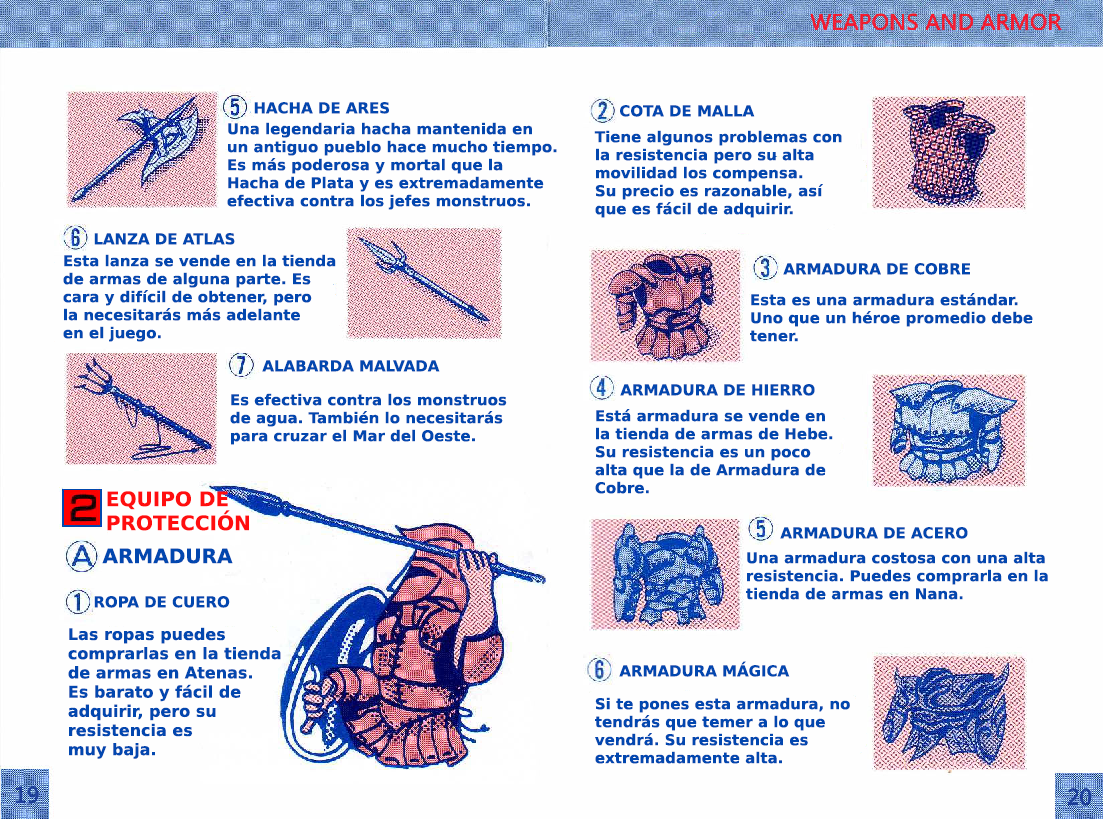
<style>
.page{position:relative;width:1103px;height:819px;background:#fefefe}
.page>*{position:absolute;margin:0}
.t1{font:15px "PrimaSansBT-Bold";color:#0247af}
.t2{font:20px "PrimaSansBT-Bold";color:#ff0e0f}
.t3{font:20px "PrimaSansBT-Bold";color:#0247af}
.t4{font:16px "PrimaSansBT-Bold";color:#0247af}
</style>
<div class="page">
<p class="t1" style="left:254px;top:102px;width:135px;height:12px">HACHA DE ARES</p>
<p class="t1" style="left:620px;top:105px;width:135px;height:12px">COTA DE MALLA</p>
<p class="t1" style="left:227px;top:122px;width:330px;height:88px">Una legendaria hacha mantenida en <br>un antiguo pueblo hace mucho tiempo. <br>Es más poderosa y mortal que la <br>Hacha de Plata y es extremadamente<br>efectiva contra los jefes monstruos.</p>
<p class="t1" style="left:594px;top:130px;width:248px;height:88px">Tiene algunos problemas con <br>la resistencia pero su alta <br>movilidad los compensa. <br>Su precio es razonable, así <br>que es fácil de adquirir.</p>
<p class="t1" style="left:94px;top:233px;width:141px;height:12px">LANZA DE ATLAS</p>
<p class="t1" style="left:63px;top:254px;width:273px;height:88px">Esta lanza se vende en la tienda <br>de armas de alguna parte. Es <br>cara y difícil de obtener, pero<br>la necesitarás más adelante<br>en el juego.</p>
<p class="t1" style="left:783px;top:263px;width:187px;height:12px">ARMADURA DE COBRE</p>
<p class="t1" style="left:750px;top:293px;width:283px;height:49px">Esta es una armadura estándar.<br>Uno que un héroe promedio debe<br>tener.</p>
<p class="t1" style="left:262px;top:360px;width:178px;height:12px">ALABARDA MALVADA</p>
<p class="t1" style="left:620px;top:384px;width:195px;height:12px">ARMADURA DE HIERRO</p>
<p class="t1" style="left:230px;top:393px;width:277px;height:52px">Es efectiva contra los monstruos <br>de agua. También lo necesitarás <br>para cruzar el Mar del Oeste.</p>
<p class="t1" style="left:595px;top:409px;width:238px;height:85px">Está armadura se vende en <br>la tienda de armas de Hebe. <br>Su resistencia es un poco <br>alta que la de Armadura de<br>Cobre.</p>
<p class="t2" style="left:107px;top:491px;width:142px;height:40px">EQUIPO DE<br>PROTECCIÓN</p>
<p class="t1" style="left:780px;top:527px;width:188px;height:12px">ARMADURA DE ACERO</p>
<p class="t3" style="left:102px;top:548px;width:131px;height:16px">ARMADURA</p>
<p class="t1" style="left:746px;top:551px;width:302px;height:49px">Una armadura costosa con una alta<br>resistencia. Puedes comprarla en la<br>tienda de armas en Nana.</p>
<p class="t1" style="left:94px;top:596px;width:136px;height:12px">ROPA DE CUERO</p>
<p class="t4" style="left:68px;top:627px;width:213px;height:132px">Las ropas puedes <br>comprarlas en la tienda <br>de armas en Atenas.<br>Es barato y fácil de <br>adquirir, pero su <br>resistencia es <br>muy baja.</p>
<p class="t1" style="left:619px;top:661px;width:171px;height:16px">ARMADURA MÁGICA</p>
<p class="t1" style="left:595px;top:697px;width:255px;height:67px">Si te pones esta armadura, no<br>tendrás que temer a lo que <br>vendrá. Su resistencia es extremadamente alta.</p>
</div>
